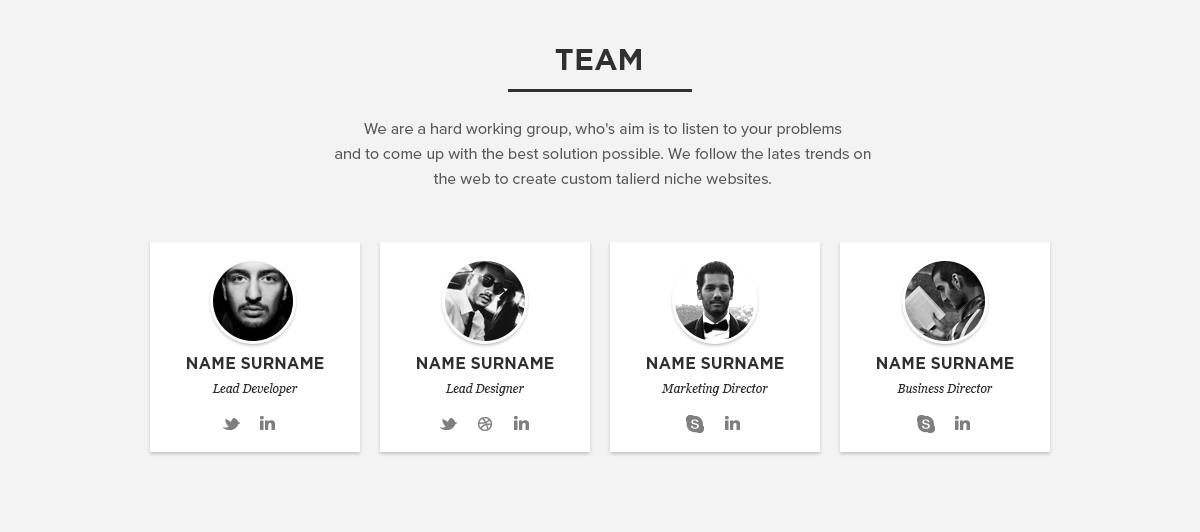
<style>
.page{position:relative;width:1200px;height:532px;background:#f3f3f3}
.page>*{position:absolute;margin:0}
.t1{font:30px "Gotham-Bold";color:#303030;text-transform:uppercase}
.t2{font:16px/25px "ProximaNova-Regular";color:#5a5a5a}
.t3{font:16px "Gotham-Bold";color:#303030;text-transform:uppercase}
.t4{font:12px "Georgia-Italic";color:#303030}
</style>
<div class="page">
<p class="t1" style="left:555px;top:49px;width:86px;height:21px">team</p>
<p class="t2" style="left:335px;top:123px;width:536px;height:61px;text-align:center">We are a hard working group, who's aim is to listen to your problems<br>and to come up with the best solution possible. We follow the lates trends on<br>the web to create custom talierd niche websites.</p>
<p class="t3" style="left:187px;top:357px;width:137px;height:12px">naME sURNAME</p>
<p class="t3" style="left:417px;top:357px;width:137px;height:12px">naME sURNAME</p>
<p class="t3" style="left:647px;top:357px;width:137px;height:12px">naME sURNAME</p>
<p class="t3" style="left:877px;top:357px;width:137px;height:12px">naME sURNAME</p>
<p class="t4" style="left:212px;top:383px;width:86px;height:13px">Lead Developer</p>
<p class="t4" style="left:445px;top:383px;width:80px;height:13px">Lead Designer</p>
<p class="t4" style="left:661px;top:383px;width:107px;height:13px">Marketing Director</p>
<p class="t4" style="left:897px;top:383px;width:96px;height:10px">Business Director</p>
</div>
